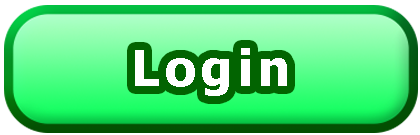
<style>
.page{position:relative;width:420px;height:135px}
.page>*{position:absolute;margin:0}
.t1{font:50px "Tahoma-Bold";letter-spacing:0.1em;color:#ffffff}
</style>
<div class="page">
<p class="t1" style="left:135px;top:48px;width:152px;height:48px">Login</p>
</div>
